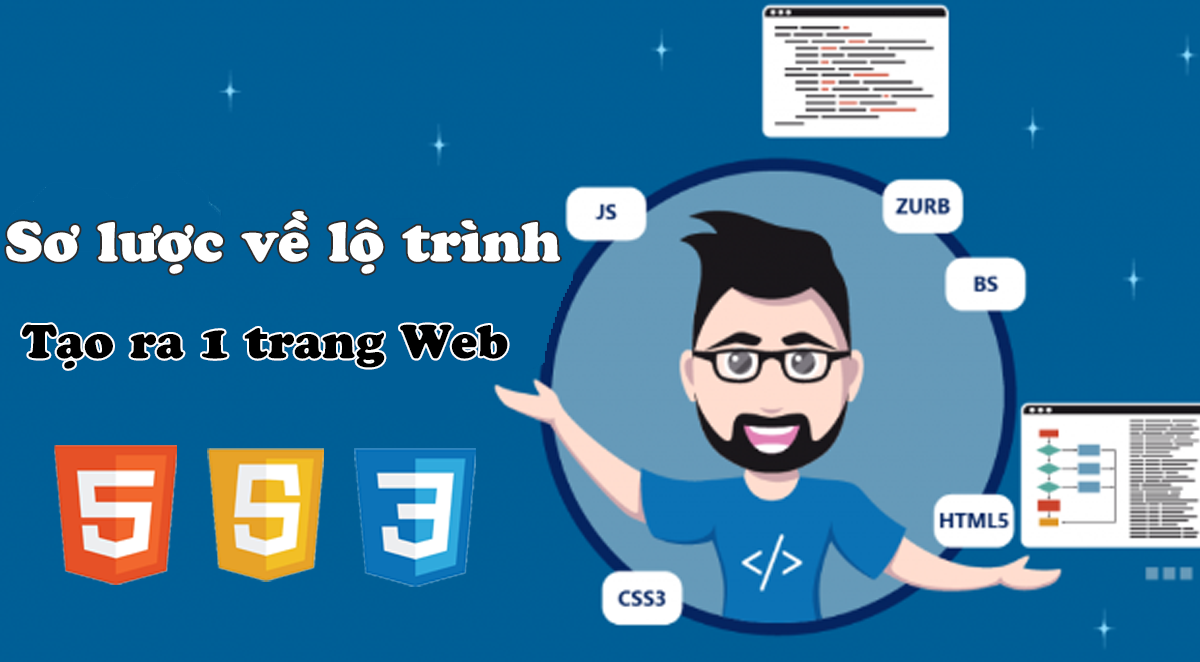
<style>
.page{position:relative;width:1200px;height:662px;background:#005e96}
.page>*{position:absolute;margin:0}
.t1{font:58.4px "UTM-Cooper-Black";color:#ffffff}
.t2{font:49.5px "UTM-Cooper-Black";color:#000000}
</style>
<div class="page">
<p class="t1" style="left:6px;top:211px;width:554px;height:63px">Sơ lược về lộ trình</p>
<p class="t2" style="left:22px;top:324px;width:486px;height:45px">Tạo ra 1 trang Web</p>
</div>
